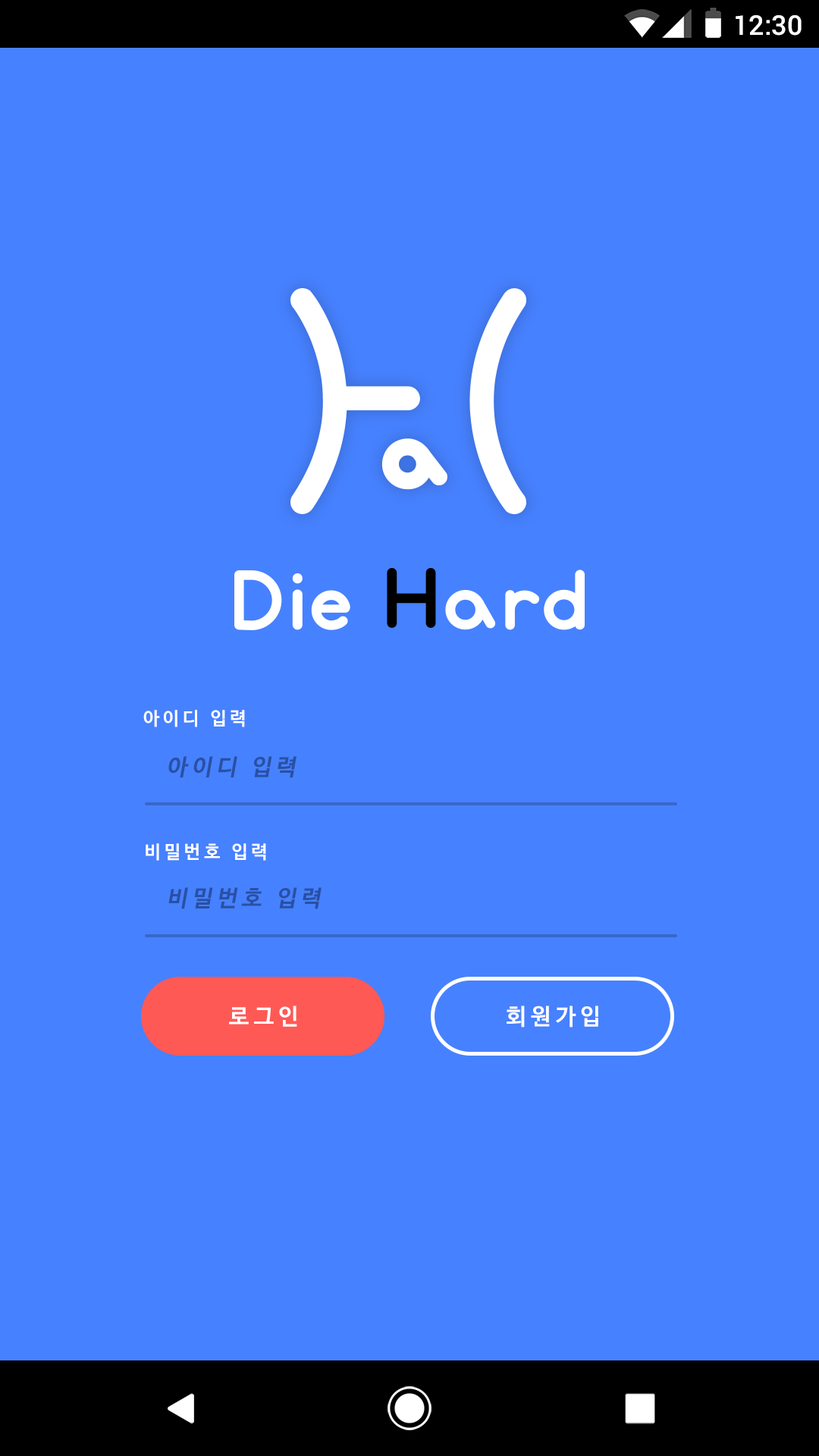
<style>
.page{position:relative;width:819px;height:1456px;background:#4681ff}
.page>*{position:absolute;margin:0}
.t1{font:27.3px "Roboto-Medium";color:#ffffff}
.t2{font:18.2px "NanumBarunGothicBold";letter-spacing:0.2em;color:#ffffff}
.t3{font:22.7px "NanumBarunGothicBold";letter-spacing:0.2em;color:#2950a3;font-style:italic}
.t4{font:22.7px "NanumBarunGothicBold";letter-spacing:0.2em;color:#ffffff}
</style>
<div class="page">
<p class="t1" style="left:736px;top:15px;width:66px;height:21px">12:30</p>
<p class="t2" style="left:143px;top:710px;width:102px;height:17px">아이디 입력</p>
<p class="t3" style="left:168px;top:756px;width:129px;height:22px">아이디 입력</p>
<p class="t2" style="left:146px;top:843px;width:120px;height:18px">비밀번호 입력</p>
<p class="t3" style="left:168px;top:887px;width:154px;height:22px">비밀번호 입력</p>
<p class="t4" style="left:229px;top:1006px;width:68px;height:21px">로그인</p>
<p class="t4" style="left:507px;top:1006px;width:91px;height:22px">회원가입</p>
</div>
